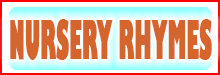
<style>
.page{position:relative;width:220px;height:75px;background:#d5652c}
.page>*{position:absolute;margin:0}
.t1{font:12.8px "GillSans-UltraBold";color:#d5652c;scale:0.33 1}
</style>
<div class="page">
<p class="t1" style="left:10px;top:19px;width:202px;height:41px">NURSERY RHYMES</p>
</div>
